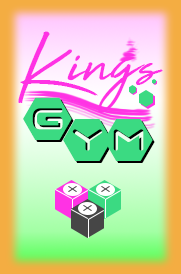
<style>
.page{position:relative;width:181px;height:274px}
.page>*{position:absolute;margin:0}
.t1{font:72px "HighTide";color:#ff32e4}
.t2{font:72px "FrauleinHex";color:#3bda82}
</style>
<div class="page">
<p class="t1" style="left:18px;top:31px;width:145px;height:82px">Kings</p>
<p class="t2" style="left:23px;top:97px;width:130px;height:64px">Gym</p>
<p class="t2" style="left:25px;top:99px;width:130px;height:64px">Gym</p>
</div>
